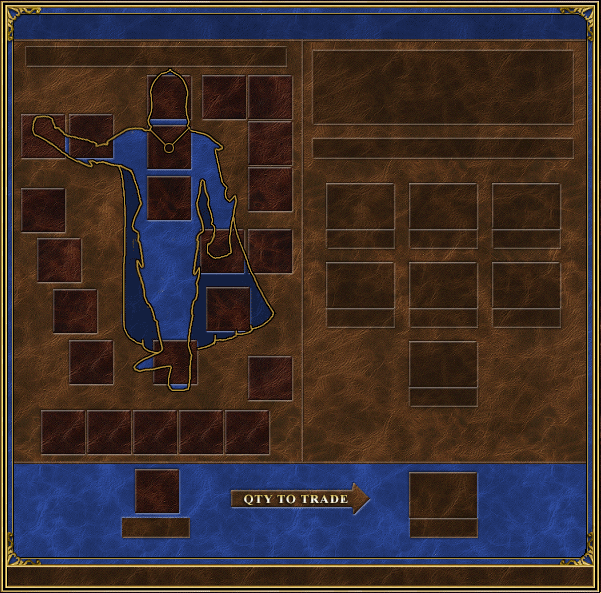
<style>
.page{position:relative;width:601px;height:593px}
.page>*{position:absolute;margin:0}
.t1{font:12px "TimesNewRomanPS-BoldMT";letter-spacing:0.07em;scale:1.05 1}
</style>
<div class="page">
<p class="t1" style="left:244px;top:494px;width:104px;height:11px">QTY TO TRADE</p>
</div>
